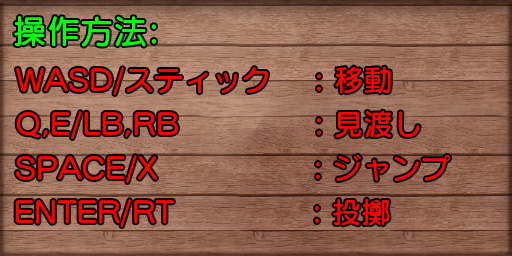
<style>
.page{position:relative;width:512px;height:256px}
.page>*{position:absolute;margin:0}
.t1{font:33.3px "SeuratProN-DB";color:#00ff08}
.t2{font:29.2px "SeuratProN-DB";color:#ff0000}
</style>
<div class="page">
<p class="t1" style="left:14px;top:16px;width:142px;height:31px">操作方法:</p>
<p class="t2" style="left:16px;top:66px;width:375px;height:29px">WASD/スティック   : 移動</p>
<p class="t2" style="left:16px;top:110px;width:404px;height:29px">Q,E/LB,RB           : 見渡し</p>
<p class="t2" style="left:15px;top:154px;width:435px;height:29px">SPACE/X      : ジャンプ</p>
<p class="t2" style="left:15px;top:198px;width:375px;height:29px">ENTER/RT     : 投擲</p>
</div>
